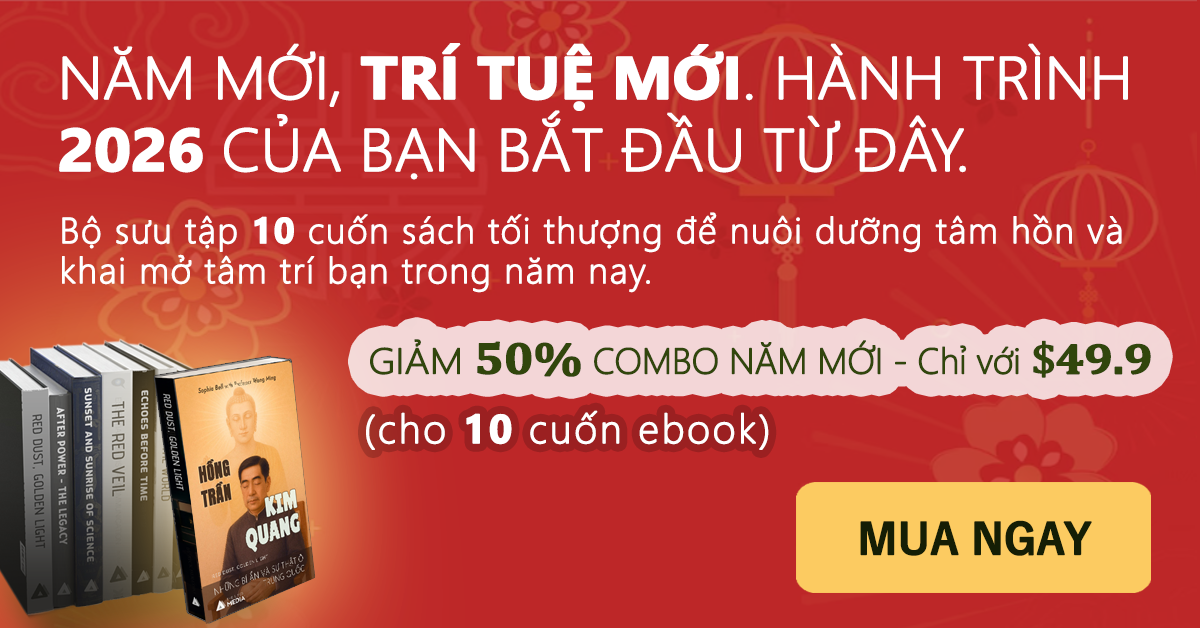
<style>
.page{position:relative;width:1200px;height:628px;background:#bd2728}
.page>*{position:absolute;margin:0}
.t1{font:59.4px/72px "SegoeUI-Light";letter-spacing:-0.025em;color:#ffffff;font-weight:bold;scale:1.07 1}
.t2{font:59.4px/72px "SegoeUI-Bold";letter-spacing:-0.025em;color:#ffffff;font-weight:bold;scale:1.07 1}
.t3{font:36px/40px "SegoeUI-Light";letter-spacing:0.025em;color:#ffffff;font-weight:bold}
.t4{font:36px/40px "SegoeUI-Bold";letter-spacing:0.025em;color:#ffffff;font-weight:bold}
.t5{font:36px "SegoeUI-Light";letter-spacing:-0.025em;color:#31460c;font-weight:bold}
.t6{font:36px "SegoeUI-Light";letter-spacing:-0.025em;color:#31460c;font-weight:bold;scale:1.11 1}
.t7{font:45px "Cambria-Bold";letter-spacing:-0.025em;color:#31460c;font-weight:bold;scale:1.11 1}
.t8{font:43.2px "Cambria";letter-spacing:-0.025em;color:#31460c;font-weight:bold;scale:1.11 1}
.t9{font:43.2px "Cambria-Bold";letter-spacing:-0.025em;color:#31460c;font-weight:bold;scale:1.11 1}
.t10{font:40px "SegoeUI-Light";letter-spacing:0.05em;color:#ffffff;font-weight:bold}
.t11{font:40px "SegoeUI-Bold";letter-spacing:0.05em;color:#ffffff;font-weight:bold}
.t12{font:42px "YuGothic-Bold";letter-spacing:-0.025em;color:#151e05;font-weight:bold}
</style>
<div class="page">
<p class="t1" style="left:59px;top:43px;width:1069px;height:137px">NĂM MỚI, <span class="t2">TRÍ TUỆ MỚI</span>. HÀNH TRÌNH <span class="t2">2026</span> CỦA BẠN BẮT ĐẦU TỪ ĐÂY.</p>
<p class="t3" style="left:62px;top:212px;width:1060px;height:81px">Bộ sưu tập <span class="t4">10</span> cuốn sách tối thượng để nuôi dưỡng tâm hồn và khai mở tâm trí bạn trong năm nay.</p>
<p class="t5" style="left:370px;top:339px;width:781px;height:39px"><span class="t6">GIẢM </span><span class="t7">50% </span>COMBO NĂM MỚI - Chỉ với<span class="t8"> $</span><span class="t9">49.9</span></p>
<p class="t10" style="left:366px;top:410px;width:403px;height:40px">(cho <span class="t11">10</span> cuốn ebook)</p>
<p class="t12" style="left:860px;top:520px;width:232px;height:36px">MUA NGAY</p>
</div>
